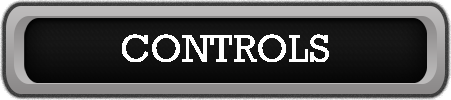
<style>
.page{position:relative;width:451px;height:100px}
.page>*{position:absolute;margin:0}
.t1{font:39.8px "Rockwell";color:#ffffff}
</style>
<div class="page">
<p class="t1" style="left:122px;top:34px;width:207px;height:28px">CONTROLS</p>
</div>
